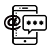
<style>
.page{position:relative;width:50px;height:50px;background:#ffffff}
.page>*{position:absolute;margin:0}
.t1{font:15.3px "Arial-BoldMT";color:#080002;scale:1.16 1}
</style>
<div class="page">
<p class="t1" style="left:4px;top:15px;width:17px;height:15px">@</p>
</div>
